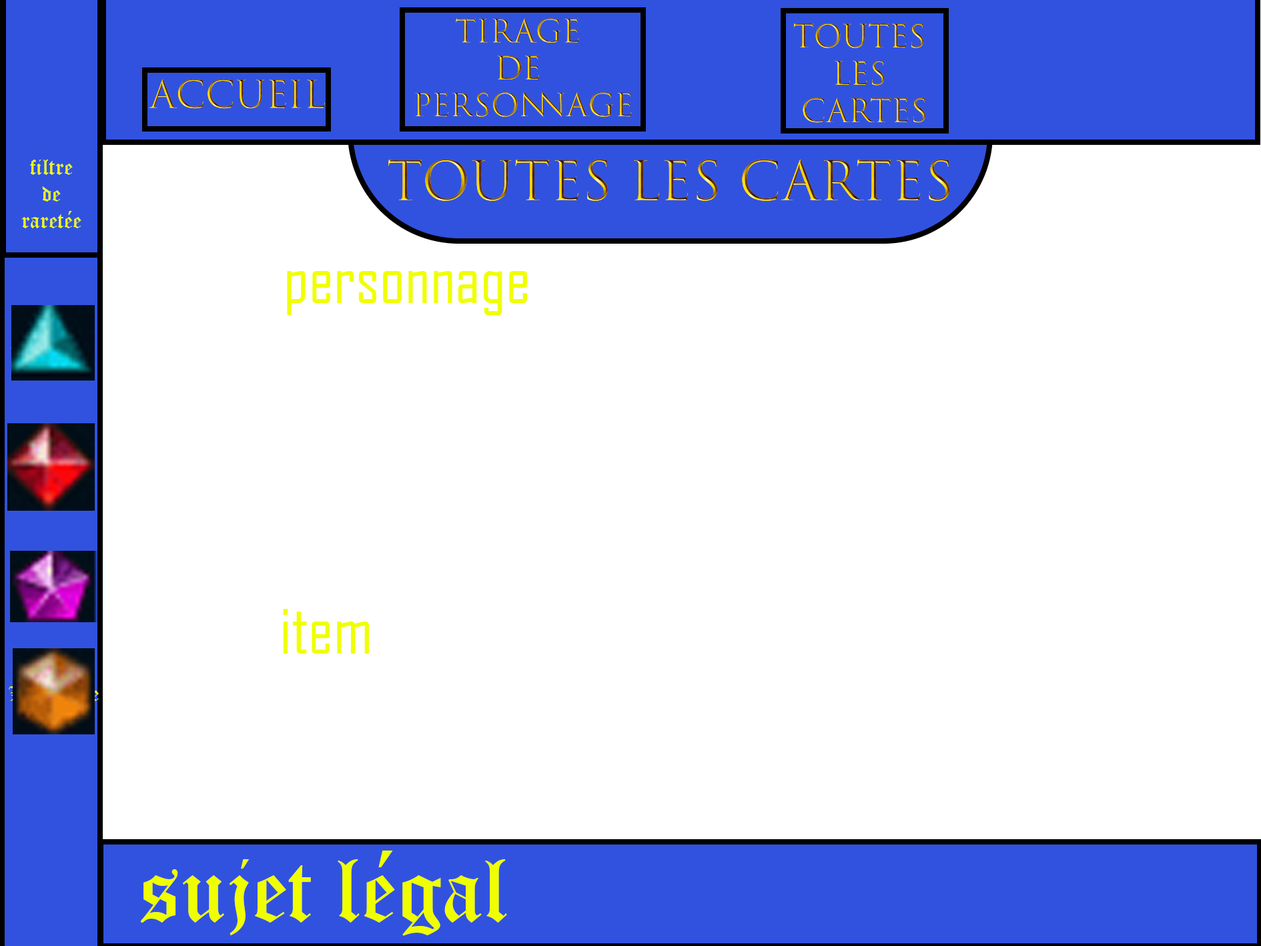
<style>
.page{position:relative;width:1261px;height:946px;background:#ffffff}
.page>*{position:absolute;margin:0}
.t1{font:30.8px "TrajanColor-Concept"}
.t2{font:31px "TrajanColor-Concept"}
.t3{font:36.8px "TrajanColor-Concept"}
.t4{font:22.2px "OldEnglishTextMT";color:#f0ff00}
.t5{font:52.6px "TrajanColor-Concept"}
.t6{font:66.7px "AgencyFB-Reg";color:#f0ff00}
.t7{font:90.2px "OldEnglishTextMT";color:#f0ff00}
</style>
<div class="page">
<p class="t1" style="left:415px;top:18px;width:217px;height:99px;text-align:center">tirage <br>de <br>personnage</p>
<p class="t2" style="left:793px;top:23px;width:133px;height:100px;text-align:center">toutes <br>les <br>cartes</p>
<p class="t3" style="left:149px;top:79px;width:176px;height:30px">Accueil</p>
<p class="t4" style="left:21px;top:159px;width:60px;height:69px;text-align:center">filtre<br>de<br>raretée</p>
<p class="t5" style="left:388px;top:159px;width:562px;height:42px">Toutes les cartes</p>
<p class="t6" style="left:287px;top:271px;width:240px;height:44px">personnage</p>
<p class="t6" style="left:283px;top:609px;width:86px;height:44px">item</p>
<p class="t7" style="left:141px;top:850px;width:366px;height:86px">sujet légal</p>
</div>
